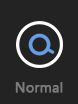
<style>
.page{position:relative;width:78px;height:104px;background:#232323}
.page>*{position:absolute;margin:0}
.t1{font:14px "SegoeUI";color:#7c7c7c;font-weight:bold}
</style>
<div class="page">
<p class="t1" style="left:15px;top:82px;width:48px;height:11px">Normal</p>
</div>
